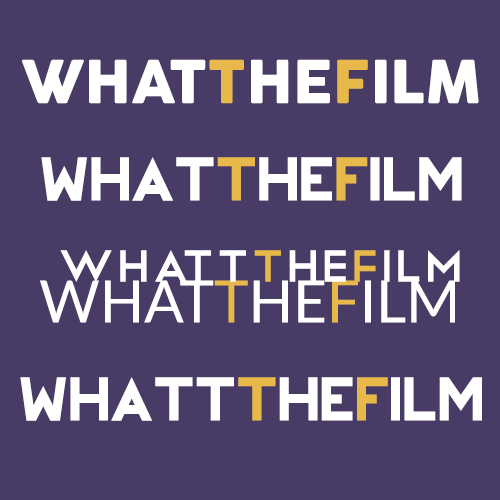
<style>
.page{position:relative;width:500px;height:500px;background:#483b66}
.page>*{position:absolute;margin:0}
.t1{font:58.4px "COCOGOOSE";color:#ffffff}
.t2{font:58.4px "COCOGOOSE";color:#e7b94b}
.t3{font:58.4px "REVOLUTION";color:#ffffff}
.t4{font:58.4px "REVOLUTION";color:#e7b94b}
.t5{font:58.4px "Telegrafico";color:#ffffff}
.t6{font:58.4px "Telegrafico";color:#e7b94b}
.t7{font:58.4px "Lato-Regular";color:#ffffff}
.t8{font:58.4px "Lato-Regular";color:#e7b94b}
</style>
<div class="page">
<p class="t1" style="left:22px;top:59px;width:457px;height:45px">WHAT<span class="t2">T</span>HE<span class="t2">F</span>ILM</p>
<p class="t3" style="left:41px;top:157px;width:421px;height:44px">what<span class="t4">T</span>he<span class="t4">f</span>ilm</p>
<p class="t5" style="left:60px;top:250px;width:400px;height:32px">WhatT<span class="t6">T</span>he<span class="t6">F</span>ilm</p>
<p class="t7" style="left:40px;top:280px;width:415px;height:43px">WHAT<span class="t8">T</span>HE<span class="t8">F</span>ILM</p>
<p class="t3" style="left:20px;top:377px;width:462px;height:44px">WhatT<span class="t4">T</span>he<span class="t4">F</span>ilm</p>
</div>
